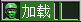
<style>
.page{position:relative;width:81px;height:22px;background:#327126}
.page>*{position:absolute;margin:0}
.t1{font:14px "SimSun";letter-spacing:0.025em;color:#ffffff}
</style>
<div class="page">
<p class="t1" style="left:22px;top:4px;width:28px;height:14px">加载</p>
</div>
